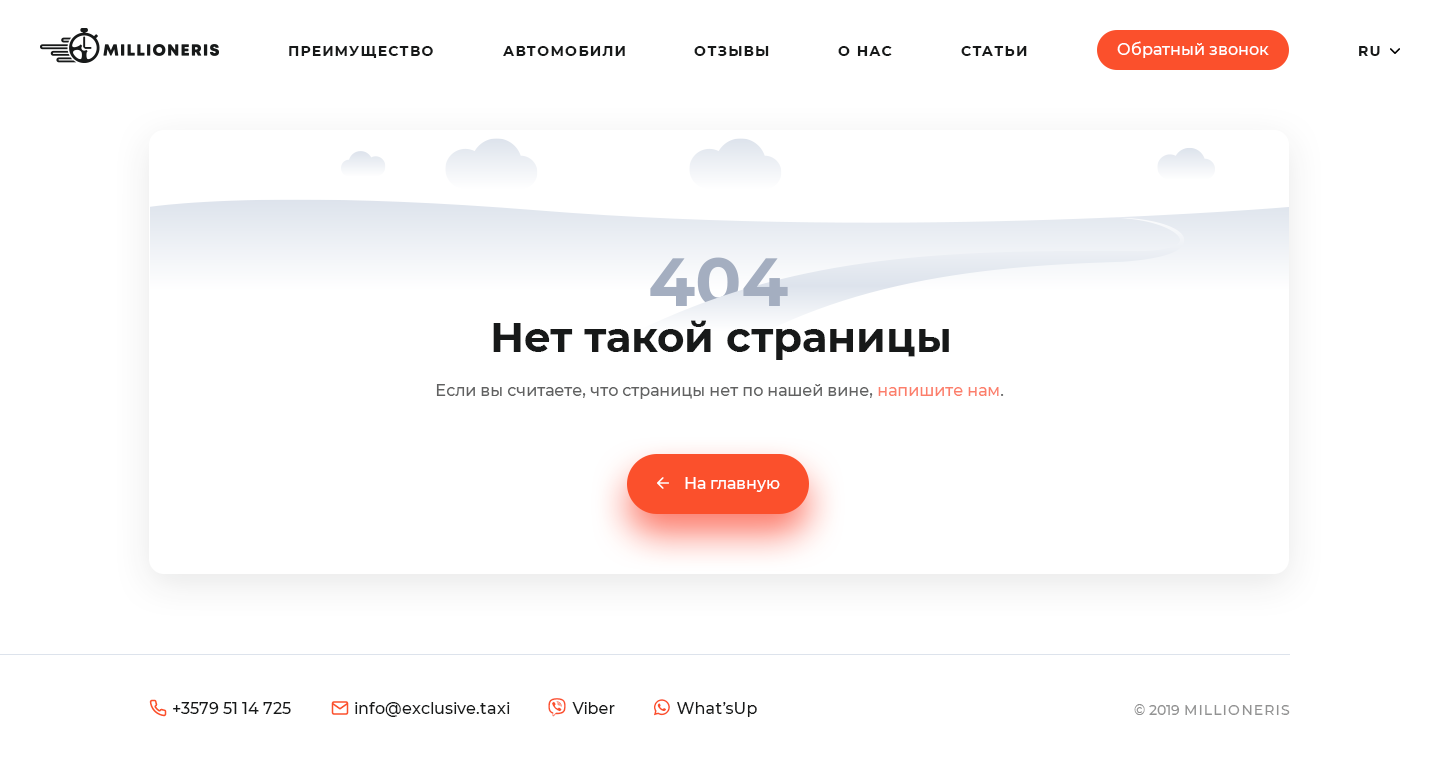
<style>
.page{position:relative;width:1440px;height:761px;background:#ffffff}
.page>*{position:absolute;margin:0}
.t1{font:16px "Montserrat-Medium";color:#ffffff}
.t2{font:14px "Montserrat-Bold";letter-spacing:0.1em;color:#171919;text-transform:uppercase}
.t3{font:42px "Montserrat-Bold";color:#171919}
.t4{font:16px "Montserrat-Medium";color:#616161}
.t5{font:16px "Montserrat-Medium";color:#171919}
.t6{font:14px "Montserrat-Medium";letter-spacing:0.1em;color:#929292}
.t7{font:14px "Montserrat-Medium";color:#929292}
</style>
<div class="page">
<p class="t1" style="left:1117px;top:41px;width:152px;height:17px">Обратный звонок</p>
<p class="t2" style="left:289px;top:46px;width:144px;height:12px">Преимущество</p>
<p class="t2" style="left:503px;top:46px;width:122px;height:10px">Автомобили</p>
<p class="t2" style="left:694px;top:46px;width:75px;height:10px">Отзывы</p>
<p class="t2" style="left:838px;top:46px;width:54px;height:10px">О нас</p>
<p class="t2" style="left:961px;top:46px;width:66px;height:10px">Статьи</p>
<p class="t2" style="left:1359px;top:46px;width:21px;height:10px">RU</p>
<p class="t3" style="left:493px;top:320px;width:456px;height:40px">Нет такой страницы</p>
<p class="t4" style="left:436px;top:384px;width:568px;height:15px">Если вы считаете, что страницы нет по нашей вине, напишите нам.</p>
<p class="t1" style="left:685px;top:477px;width:95px;height:15px">На главную</p>
<p class="t5" style="left:173px;top:702px;width:118px;height:12px">+3579 51 14 725</p>
<p class="t5" style="left:355px;top:702px;width:155px;height:15px">info@exclusive.taxi</p>
<p class="t6" style="left:1134px;top:704px;width:156px;height:11px"><span class="t7">© 2019 </span>MILLIONERIS</p>
</div>
